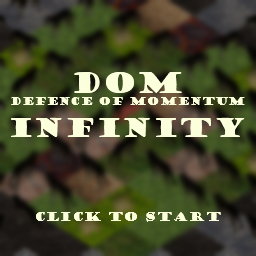
<style>
.page{position:relative;width:256px;height:256px}
.page>*{position:absolute;margin:0}
.t1{font:10.2px "GoudyStout";color:#fcffdb}
.t2{font:27.9px "GoudyStout";color:#fcffdb}
.t3{font:26px "GoudyStout";color:#fcffdb}
.t4{font:12px "GoudyStout";color:#fcffdb}
</style>
<div class="page">
<p class="t1" style="left:11px;top:72px;width:234px;height:65px;text-align:center"><span class="t2">DOM<br></span>Defence of Momentum<br><span class="t3">INFINITY</span></p>
<p class="t4" style="left:36px;top:212px;width:185px;height:10px">click to start</p>
</div>
